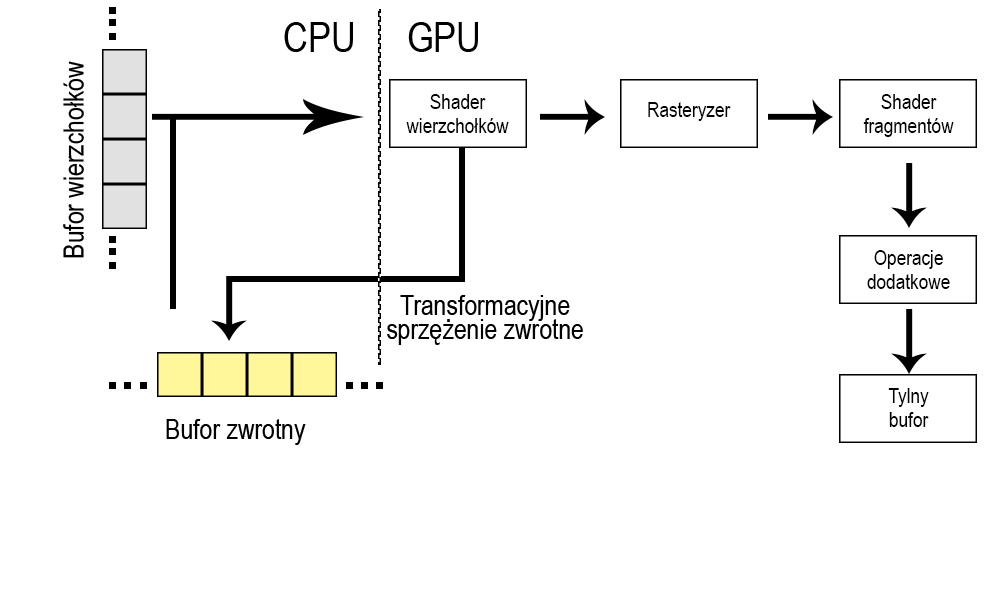
<style>
.page{position:relative;width:1000px;height:600px;background:#ffffff}
.page>*{position:absolute;margin:0}
.t1{font:72px "ArialNarrow";color:#000000}
.t2{font:48.2px "ArialNarrow";color:#000000}
.t3{font:36px/24px "ArialNarrow";color:#000000}
.t4{font:36px "ArialNarrow";color:#000000}
.t5{font:48px/24px "ArialNarrow";color:#000000}
.t6{font:48px "ArialNarrow";color:#000000}
</style>
<div class="page">
<p class="t1" style="left:284px;top:22px;width:69px;height:30px">CPU</p>
<p class="t1" style="left:408px;top:22px;width:70px;height:30px">GPU</p>
<p class="t2" style="left:63px;top:61px;width:21px;height:197px;rotate:-90deg">Bufor wierzchołków</p>
<p class="t3" style="left:406px;top:94px;width:103px;height:39px;text-align:center">Shader <br>wierzchołków</p>
<p class="t4" style="left:648px;top:102px;width:83px;height:19px">Rasteryzer</p>
<p class="t3" style="left:863px;top:94px;width:91px;height:43px;text-align:center">Shader <br>fragmentów</p>
<p class="t3" style="left:867px;top:250px;width:83px;height:39px;text-align:center">Operacje<br>dodatkowe</p>
<p class="t5" style="left:387px;top:295px;width:196px;height:50px;text-align:center">Transformacyjne<br>sprzężenie zwrotne</p>
<p class="t3" style="left:888px;top:388px;width:41px;height:39px;text-align:center">Tylny<br>bufor</p>
<p class="t6" style="left:166px;top:419px;width:140px;height:26px">Bufor zwrotny</p>
</div>
